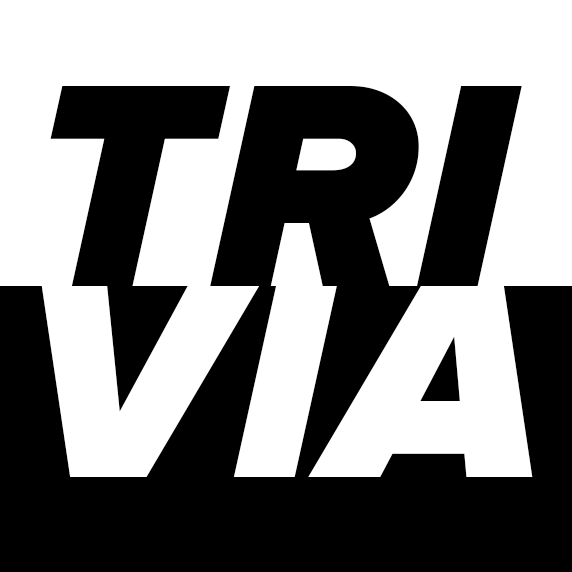
<style>
.page{position:relative;width:572px;height:572px;background:#ffffff}
.page>*{position:absolute;margin:0}
.t1{font:300px "ProximaNova-BlackIt";letter-spacing:0.01em;color:#000000}
.t2{font:300px "ProximaNova-BlackIt";letter-spacing:0.01em;color:#ffffff}
</style>
<div class="page">
<p class="t1" style="left:50px;top:86px;width:472px;height:200px">TRI</p>
<p class="t2" style="left:40px;top:277px;width:493px;height:200px">VIA</p>
</div>
